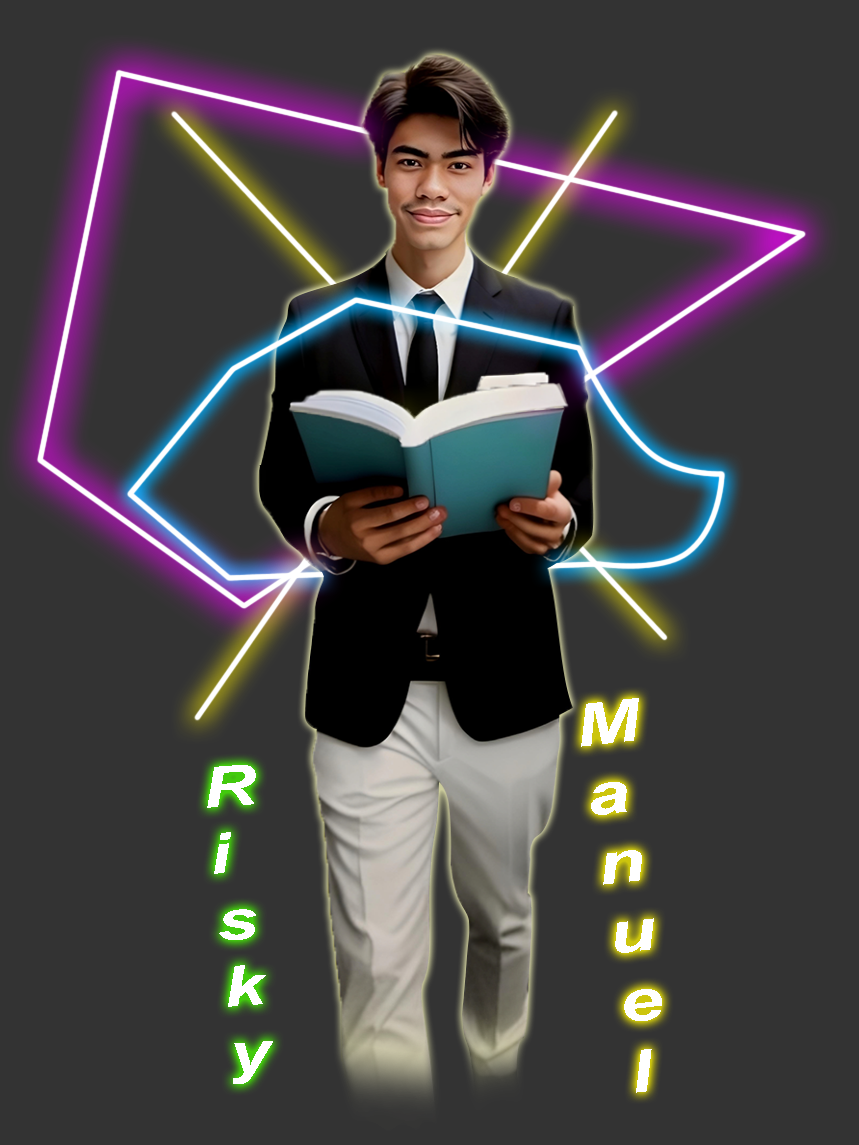
<style>
.page{position:relative;width:859px;height:1145px;background:#333333}
.page>*{position:absolute;margin:0}
.t1{font:59.1px/70px "Arial-BoldItalicMT";letter-spacing:0.3em;color:#ffffff;scale:1.31 1}
.t2{font:56.4px/66.8px "Arial-BoldItalicMT";letter-spacing:0.3em;color:#ffffff;scale:1.31 1}
</style>
<div class="page">
<p class="t1" style="left:581px;top:698px;width:81px;height:395px;rotate:-7deg">M<br>a<br>n<br>u<br>e<br>l</p>
<p class="t2" style="left:207px;top:765px;width:66px;height:319px;rotate:-4deg">R<br>i<br>s<br>k<br>y</p>
</div>
